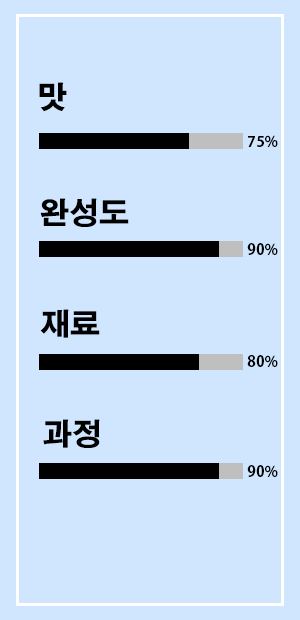
<style>
.page{position:relative;width:300px;height:620px;background:#d0e6ff}
.page>*{position:absolute;margin:0}
.t1{font:30px "AdobeGothicStd-Bold";color:#000000}
.t2{font:15px "AdobeGothicStd-Bold";color:#000000}
</style>
<div class="page">
<p class="t1" style="left:39px;top:82px;width:28px;height:30px">맛</p>
<p class="t2" style="left:248px;top:135px;width:30px;height:13px">75%</p>
<p class="t1" style="left:40px;top:198px;width:89px;height:29px">완성도</p>
<p class="t2" style="left:247px;top:243px;width:31px;height:13px">90%</p>
<p class="t1" style="left:40px;top:309px;width:60px;height:29px">재료</p>
<p class="t2" style="left:247px;top:355px;width:31px;height:13px">80%</p>
<p class="t1" style="left:43px;top:419px;width:57px;height:29px">과정</p>
<p class="t2" style="left:247px;top:465px;width:31px;height:13px">90%</p>
</div>
